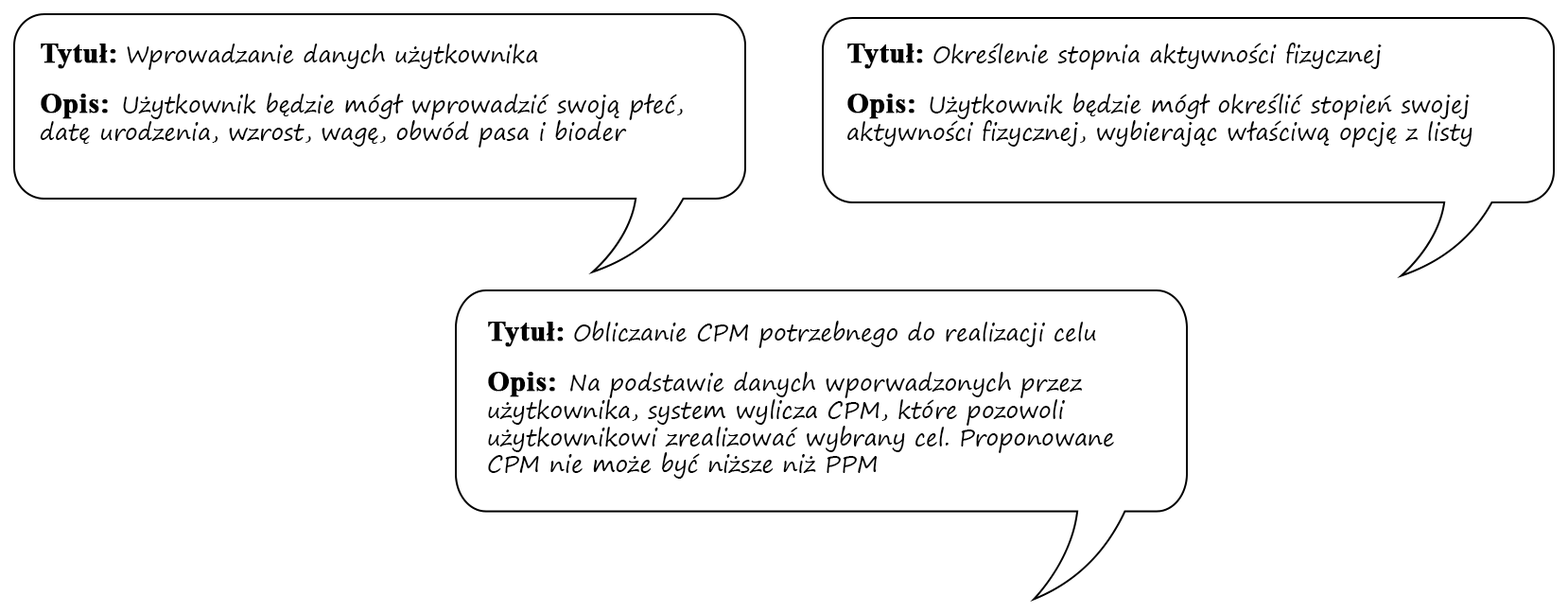
<style>
.page{position:relative;width:1568px;height:613px;background:#ffffff}
.page>*{position:absolute;margin:0}
.t1{font:22.7px "SegoePrint";color:#000000}
.t2{font:28.4px "TimesNewRomanPS-BoldMT";color:#000000;font-weight:bold}
</style>
<div class="page">
<p class="t1" style="left:40px;top:44px;width:643px;height:104px"><span class="t2">Tytuł: </span>Wprowadzanie danych użytkownika<br><br><span class="t2">Opis:  </span>Użytkownik będzie mógł wprowadzić swoją płeć, datę urodzenia, wzrost, wagę, obwód pasa i bioder</p>
<p class="t1" style="left:847px;top:43px;width:625px;height:105px"><span class="t2">Tytuł: </span>Określenie stopnia aktywności fizycznej<br><br><span class="t2">Opis:  </span>Użytkownik będzie mógł określić stopień swojej aktywności fizycznej, wybierając właściwą opcję z listy</p>
<p class="t1" style="left:488px;top:321px;width:626px;height:158px"><span class="t2">Tytuł: </span>Obliczanie CPM potrzebnego do realizacji celu<br><br><span class="t2">Opis:  </span>Na podstawie danych wporwadzonych przez użytkownika, system wylicza CPM, które pozowoli użytkownikowi zrealizować wybrany cel. Proponowane CPM nie może być niższe niż PPM</p>
</div>
